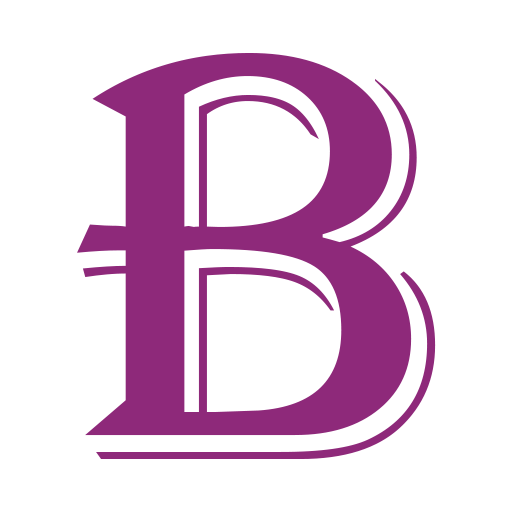
<style>
.page{position:relative;width:512px;height:512px;background:#ffffff}
.page>*{position:absolute;margin:0}
.t1{font:600px "Algerian";color:#8e297a}
</style>
<div class="page">
<p class="t1" style="left:77px;top:53px;width:359px;height:406px">B</p>
</div>
